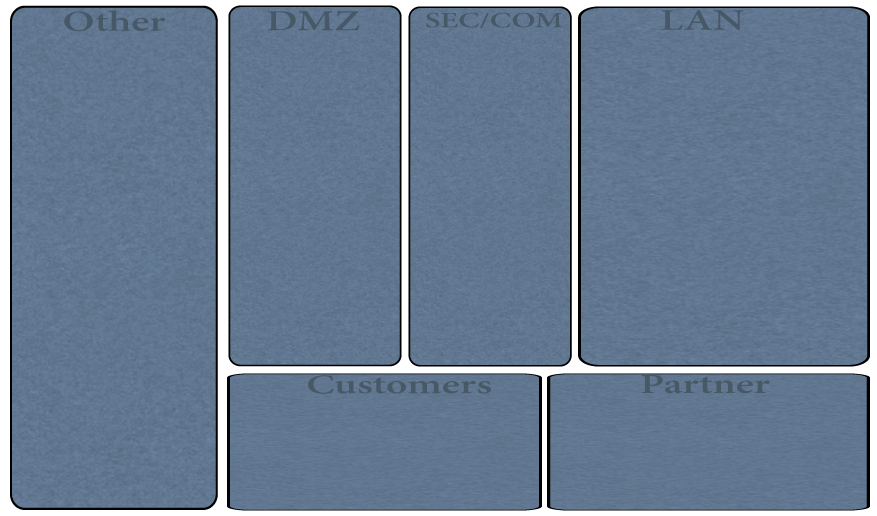
<style>
.page{position:relative;width:877px;height:516px}
.page>*{position:absolute;margin:0}
.t1{font:28.7px "AdobeHebrew-Bold";color:#475866;scale:1.42 1}
.t2{font:21.4px "AdobeHebrew-Bold";color:#475866;scale:1.43 1}
.t3{font:29.4px "AdobeHebrew-Bold";color:#475866;scale:1.39 1}
.t4{font:26.7px "AdobeHebrew-Bold";color:#475866;scale:1.53 1}
.t5{font:27.1px "AdobeHebrew-Bold";color:#475866;scale:1.5 1}
</style>
<div class="page">
<p class="t1" style="left:64px;top:10px;width:102px;height:22px">Other</p>
<p class="t1" style="left:267px;top:10px;width:93px;height:21px">DMZ</p>
<p class="t2" style="left:426px;top:12px;width:136px;height:17px">SEC/COM</p>
<p class="t3" style="left:661px;top:9px;width:83px;height:21px">LAN</p>
<p class="t4" style="left:308px;top:375px;width:183px;height:19px">Customers</p>
<p class="t5" style="left:641px;top:375px;width:129px;height:19px">Partner</p>
</div>
